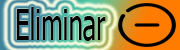
<style>
.page{position:relative;width:180px;height:50px}
.page>*{position:absolute;margin:0}
.t1{font:42.5px "Tahoma";color:#000000;scale:0.6 1}
</style>
<div class="page">
<p class="t1" style="left:16px;top:7px;width:90px;height:34px">Eliminar</p>
</div>
